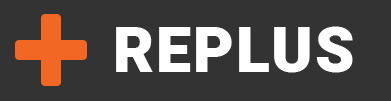
<style>
.page{position:relative;width:391px;height:101px;background:#333333}
.page>*{position:absolute;margin:0}
.t1{font:62.7px "Heebo-Black";letter-spacing:0.03em;color:#ffffff}
</style>
<div class="page">
<p class="t1" style="left:116px;top:26px;width:237px;height:47px">REPLUS</p>
</div>
